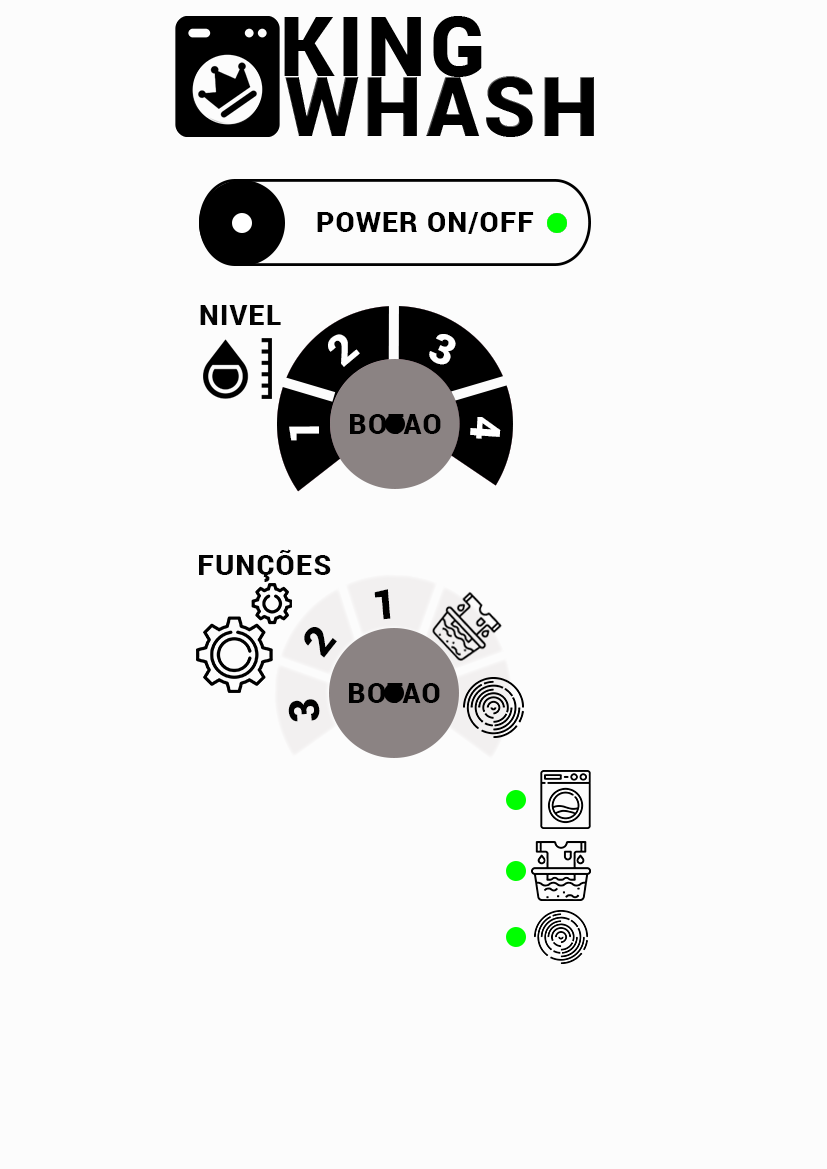
<style>
.page{position:relative;width:827px;height:1169px;background:#fcfcfc}
.page>*{position:absolute;margin:0}
.t1{font:27.8px "Roboto-Black";letter-spacing:0.05em;color:#000000}
.t2{font:27.8px "Roboto-Black";letter-spacing:0.05em;color:#030303}
.t3{font:41.7px "Roboto-Black";letter-spacing:0.05em;color:#ffffff}
.t4{font:41.7px "Roboto-Black";letter-spacing:0.05em;color:#000000}
</style>
<div class="page">
<p class="t1" style="left:317px;top:212px;width:217px;height:22px">POWER ON/OFF</p>
<p class="t2" style="left:200px;top:305px;width:81px;height:20px">NIVEL</p>
<p class="t3" style="left:328px;top:334px;width:32px;height:33px;rotate:-40deg">2</p>
<p class="t3" style="left:429px;top:334px;width:27px;height:31px;rotate:23deg">3</p>
<p class="t1" style="left:350px;top:414px;width:91px;height:20px">BOTAO</p>
<p class="t3" style="left:470px;top:417px;width:31px;height:22px;rotate:94deg">4</p>
<p class="t3" style="left:289px;top:426px;width:30px;height:15px;rotate:-90deg">1</p>
<p class="t2" style="left:199px;top:549px;width:132px;height:33px">FUNÇÕES</p>
<p class="t4" style="left:374px;top:589px;width:17px;height:31px;rotate:-5deg">1</p>
<p class="t4" style="left:304px;top:627px;width:33px;height:31px;rotate:-52deg">2</p>
<p class="t1" style="left:349px;top:683px;width:91px;height:20px">BOTAO</p>
<p class="t4" style="left:288px;top:699px;width:32px;height:23px;rotate:-95deg">3</p>
</div>
